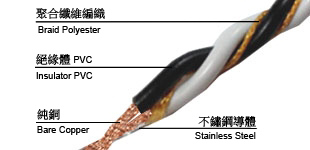
<style>
.page{position:relative;width:310px;height:150px;background:#ffffff}
.page>*{position:absolute;margin:0}
.t1{font:11.5px "PMingLiU";color:#000000}
.t2{font:9.2px "ArialMT";color:#000000}
</style>
<div class="page">
<p class="t1" style="left:36px;top:8px;width:69px;height:11px">聚合纖維編織</p>
<p class="t2" style="left:38px;top:26px;width:63px;height:9px">Braid Polyester</p>
<p class="t1" style="left:36px;top:54px;width:56px;height:11px">絕緣體 <span class="t2">PVC</span></p>
<p class="t2" style="left:36px;top:72px;width:57px;height:7px">Insulator PVC</p>
<p class="t1" style="left:37px;top:109px;width:23px;height:11px">純銅</p>
<p class="t2" style="left:37px;top:126px;width:53px;height:9px">Bare Copper</p>
<p class="t1" style="left:198px;top:116px;width:58px;height:12px">不鏽鋼導體</p>
<p class="t2" style="left:195px;top:132px;width:61px;height:7px">Stainless Steel</p>
</div>
